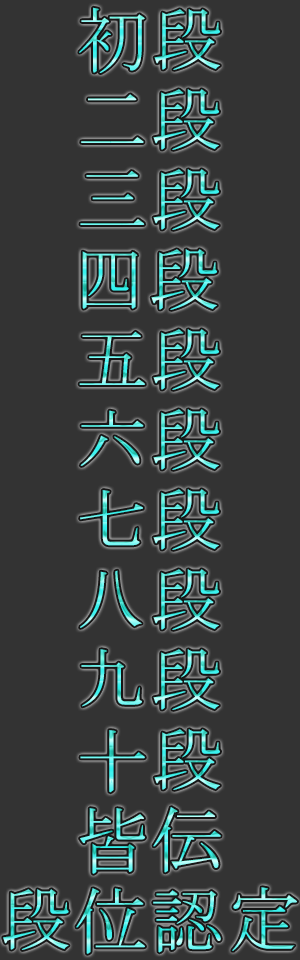
<style>
.page{position:relative;width:300px;height:960px;background:#333333}
.page>*{position:absolute;margin:0}
.t1{font:72px "MS-Mincho";letter-spacing:0.05em}
</style>
<div class="page">
<p class="t1" style="left:79px;top:7px;width:141px;height:66px">初段</p>
<p class="t1" style="left:81px;top:89px;width:138px;height:61px">二段</p>
<p class="t1" style="left:80px;top:169px;width:139px;height:61px">三段</p>
<p class="t1" style="left:82px;top:249px;width:135px;height:61px">四段</p>
<p class="t1" style="left:79px;top:329px;width:140px;height:61px">五段</p>
<p class="t1" style="left:80px;top:409px;width:139px;height:61px">六段</p>
<p class="t1" style="left:80px;top:489px;width:139px;height:61px">七段</p>
<p class="t1" style="left:80px;top:569px;width:139px;height:61px">八段</p>
<p class="t1" style="left:81px;top:649px;width:138px;height:61px">九段</p>
<p class="t1" style="left:80px;top:729px;width:140px;height:64px">十段</p>
<p class="t1" style="left:80px;top:807px;width:141px;height:67px">皆伝</p>
<p class="t1" style="left:3px;top:887px;width:294px;height:67px">段位認定</p>
</div>
